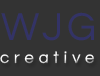
<style>
.page{position:relative;width:100px;height:76px;background:#333333}
.page>*{position:absolute;margin:0}
.t1{font:40.4px "Questrial-Regular";letter-spacing:0.1em;color:#333366}
.t2{font:16.8px "Questrial-Regular";letter-spacing:0.295em}
</style>
<div class="page">
<p class="t1" style="left:1px;top:12px;width:93px;height:29px">WJG</p>
<p class="t2" style="left:0px;top:51px;width:95px;height:13px">creative</p>
</div>
